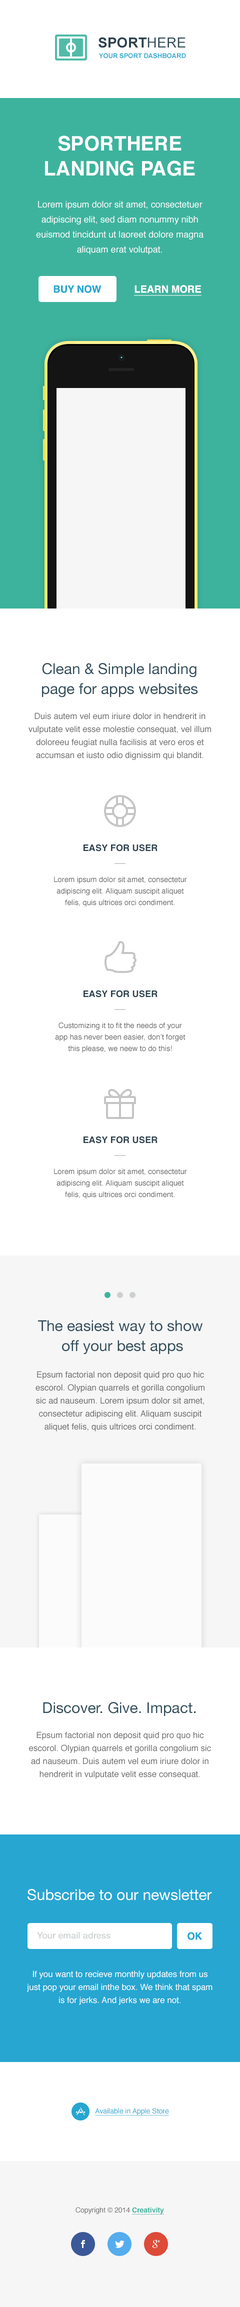
<style>
.page{position:relative;width:240px;height:2307px;background:#ffffff}
.page>*{position:absolute;margin:0}
.t1{font:14px "Arial-BoldMT";letter-spacing:0.01em;color:#2b414d;text-transform:uppercase}
.t2{font:14px "ArialMT";letter-spacing:0.01em;color:#324d5b;text-transform:uppercase}
.t3{font:6.5px "Arial-BoldMT";color:#26a6d1;text-transform:uppercase}
.t4{font:20px/25px "Helvetica-Bold";color:#ffffff;text-transform:uppercase}
.t5{font:9px/15px "Helvetica";color:#ffffff}
.t6{font:10px "Helvetica-Bold";color:#26a6d1;text-transform:uppercase}
.t7{font:10px "Helvetica-Bold";color:#ffffff;text-transform:uppercase;text-decoration:underline}
.t8{font:15px/20px "HelveticaNeue";color:#324d5b}
.t9{font:8.5px/13px "Helvetica";color:#6a6a6a}
.t10{font:9px "Helvetica-Bold";letter-spacing:0.015em;color:#2b414d;text-transform:uppercase}
.t11{font:7.5px/11.5px "Helvetica";color:#696969}
.t12{font:15px "HelveticaNeue";color:#324d5b}
.t13{font:15px "HelveticaNeue";color:#ffffff}
.t14{font:9px "HelveticaNeue-Medium";color:#ccd0d2}
.t15{font:8.5px/13px "Helvetica";color:#ffffff}
.t16{font:7px "Helvetica";color:#26a6d1;text-decoration:underline}
.t17{font:7px "Helvetica";color:#6a6a6a}
.t18{font:7px "Helvetica-Bold";color:#3db39e;text-decoration:underline}
</style>
<div class="page">
<p class="t1" style="left:99px;top:37px;width:87px;height:11px">SPORT<span class="t2">HERE</span></p>
<p class="t3" style="left:99px;top:53px;width:87px;height:6px">YOUR SPORT DASHBOARD</p>
<p class="t4" style="left:45px;top:136px;width:150px;height:40px;text-align:center">SPORTHERE<br>LANDING PAGE</p>
<p class="t5" style="left:36px;top:201px;width:168px;height:54px;text-align:center">Lorem ipsum dolor sit amet, consectetuer adipiscing elit, sed diam nonummy nibh euismod tincidunt ut laoreet dolore magna aliquam erat volutpat.</p>
<p class="t6" style="left:54px;top:285px;width:48px;height:8px">BUY NOW</p>
<p class="t7" style="left:134px;top:285px;width:68px;height:11px">Learn more</p>
<p class="t8" style="left:42px;top:663px;width:156px;height:35px;text-align:center">Clean &amp; Simple landing<br>page for apps websites</p>
<p class="t9" style="left:29px;top:713px;width:182px;height:47px;text-align:center">Duis autem vel eum iriure dolor in hendrerit in vulputate velit esse molestie consequat, vel illum doloreeu feugiat nulla facilisis at vero eros et accumsan et iusto odio dignissim qui blandit.</p>
<p class="t10" style="left:84px;top:844px;width:74px;height:8px">Easy for user</p>
<p class="t11" style="left:54px;top:877px;width:133px;height:30px;text-align:center">Lorem ipsum dolor sit amet, consectetur adipiscing elit. Aliquam suscipit aliquet felis, quis ultrices orci condiment.</p>
<p class="t10" style="left:84px;top:990px;width:74px;height:8px">Easy for user</p>
<p class="t11" style="left:55px;top:1023px;width:131px;height:30px;text-align:center">Customizing it to fit the needs of your<br>app has never been easier, don’t forget<br>this please, we neew to do this!</p>
<p class="t10" style="left:84px;top:1136px;width:74px;height:8px">Easy for user</p>
<p class="t11" style="left:54px;top:1169px;width:133px;height:30px;text-align:center">Lorem ipsum dolor sit amet, consectetur adipiscing elit. Aliquam suscipit aliquet felis, quis ultrices orci condiment.</p>
<p class="t8" style="left:38px;top:1320px;width:165px;height:35px;text-align:center">The easiest way to show <br>off your best apps</p>
<p class="t9" style="left:36px;top:1371px;width:169px;height:61px;text-align:center">Epsum factorial non deposit quid pro quo hic<br>escorol. Olypian quarrels et gorilla congolium<br>sic ad nauseum. Lorem ipsum dolor sit amet,<br>consectetur adipiscing elit. Aliquam suscipit<br>aliquet felis, quis ultrices orci condiment.</p>
<p class="t12" style="left:43px;top:1702px;width:153px;height:14px">Discover. Give. Impact.</p>
<p class="t9" style="left:29px;top:1732px;width:182px;height:47px;text-align:center">Epsum factorial non deposit quid pro quo hic escorol. Olypian quarrels et gorilla congolium sic ad nauseum. Duis autem vel eum iriure dolor in hendrerit in vulputate velit esse consequat.</p>
<p class="t13" style="left:28px;top:1889px;width:184px;height:12px">Subscribe to our newsletter</p>
<p class="t14" style="left:37px;top:1932px;width:74px;height:7px">Your email adress</p>
<p class="t6" style="left:188px;top:1932px;width:15px;height:8px">OK</p>
<p class="t15" style="left:27px;top:1971px;width:186px;height:34px;text-align:center">If you want to recieve monthly updates from us just pop your email inthe box. We think that spam is for jerks. And jerks we are not.</p>
<p class="t16" style="left:95px;top:2108px;width:74px;height:8px">Available in Apple Store</p>
<p class="t17" style="left:76px;top:2207px;width:88px;height:8px">Copyright © 2014 <span class="t18">Сreativity</span></p>
</div>
